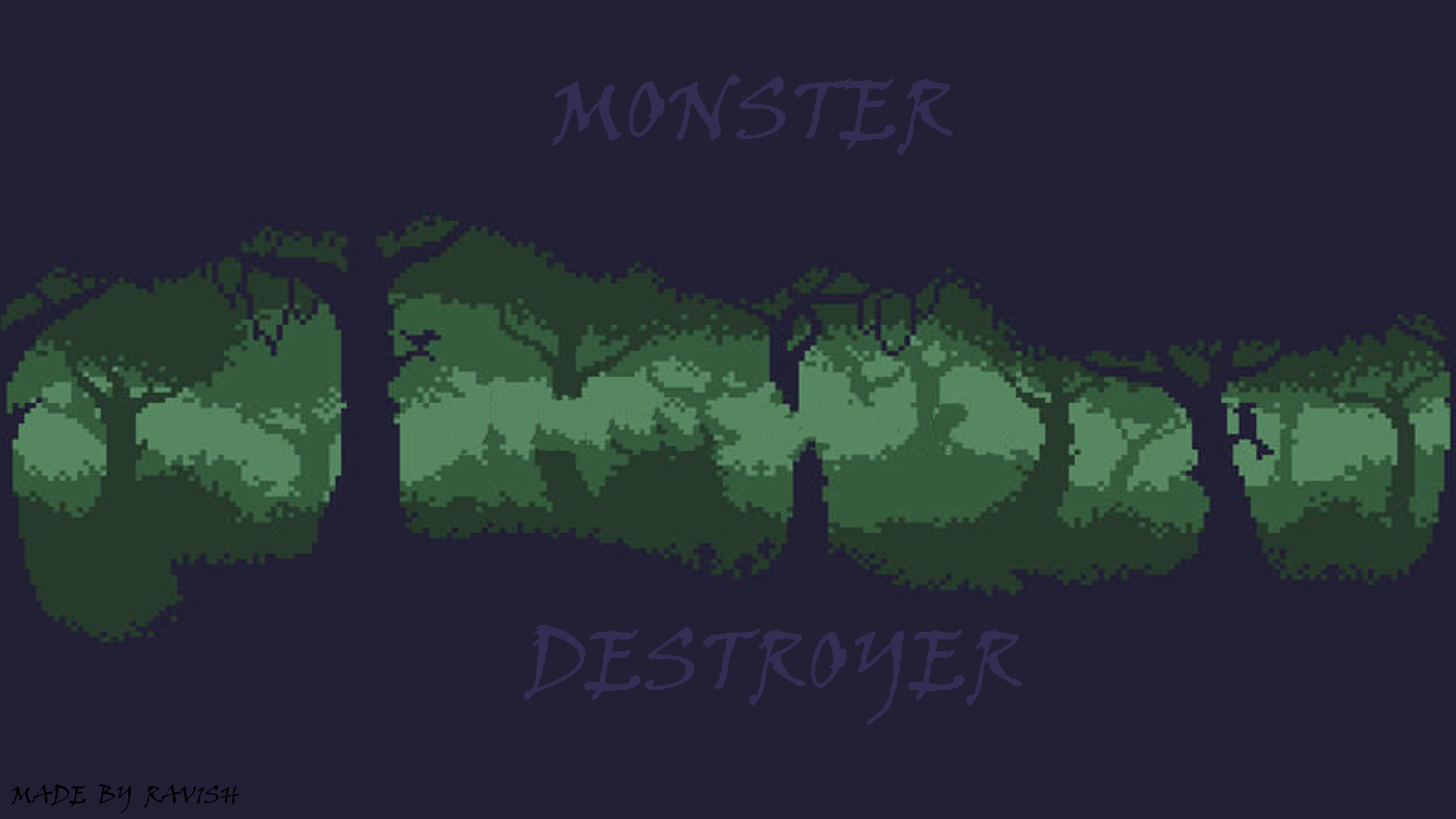
<style>
.page{position:relative;width:1456px;height:819px;background:#222035}
.page>*{position:absolute;margin:0}
.t1{font:83.3px "VinerHandITC";color:#332f54}
.t2{font:24px "VinerHandITC";color:#000000}
</style>
<div class="page">
<p class="t1" style="left:551px;top:74px;width:402px;height:81px">MONSTER</p>
<p class="t1" style="left:524px;top:624px;width:498px;height:101px">DESTROYER</p>
<p class="t2" style="left:11px;top:783px;width:229px;height:31px">MADE  BY  RAV1SH</p>
</div>
